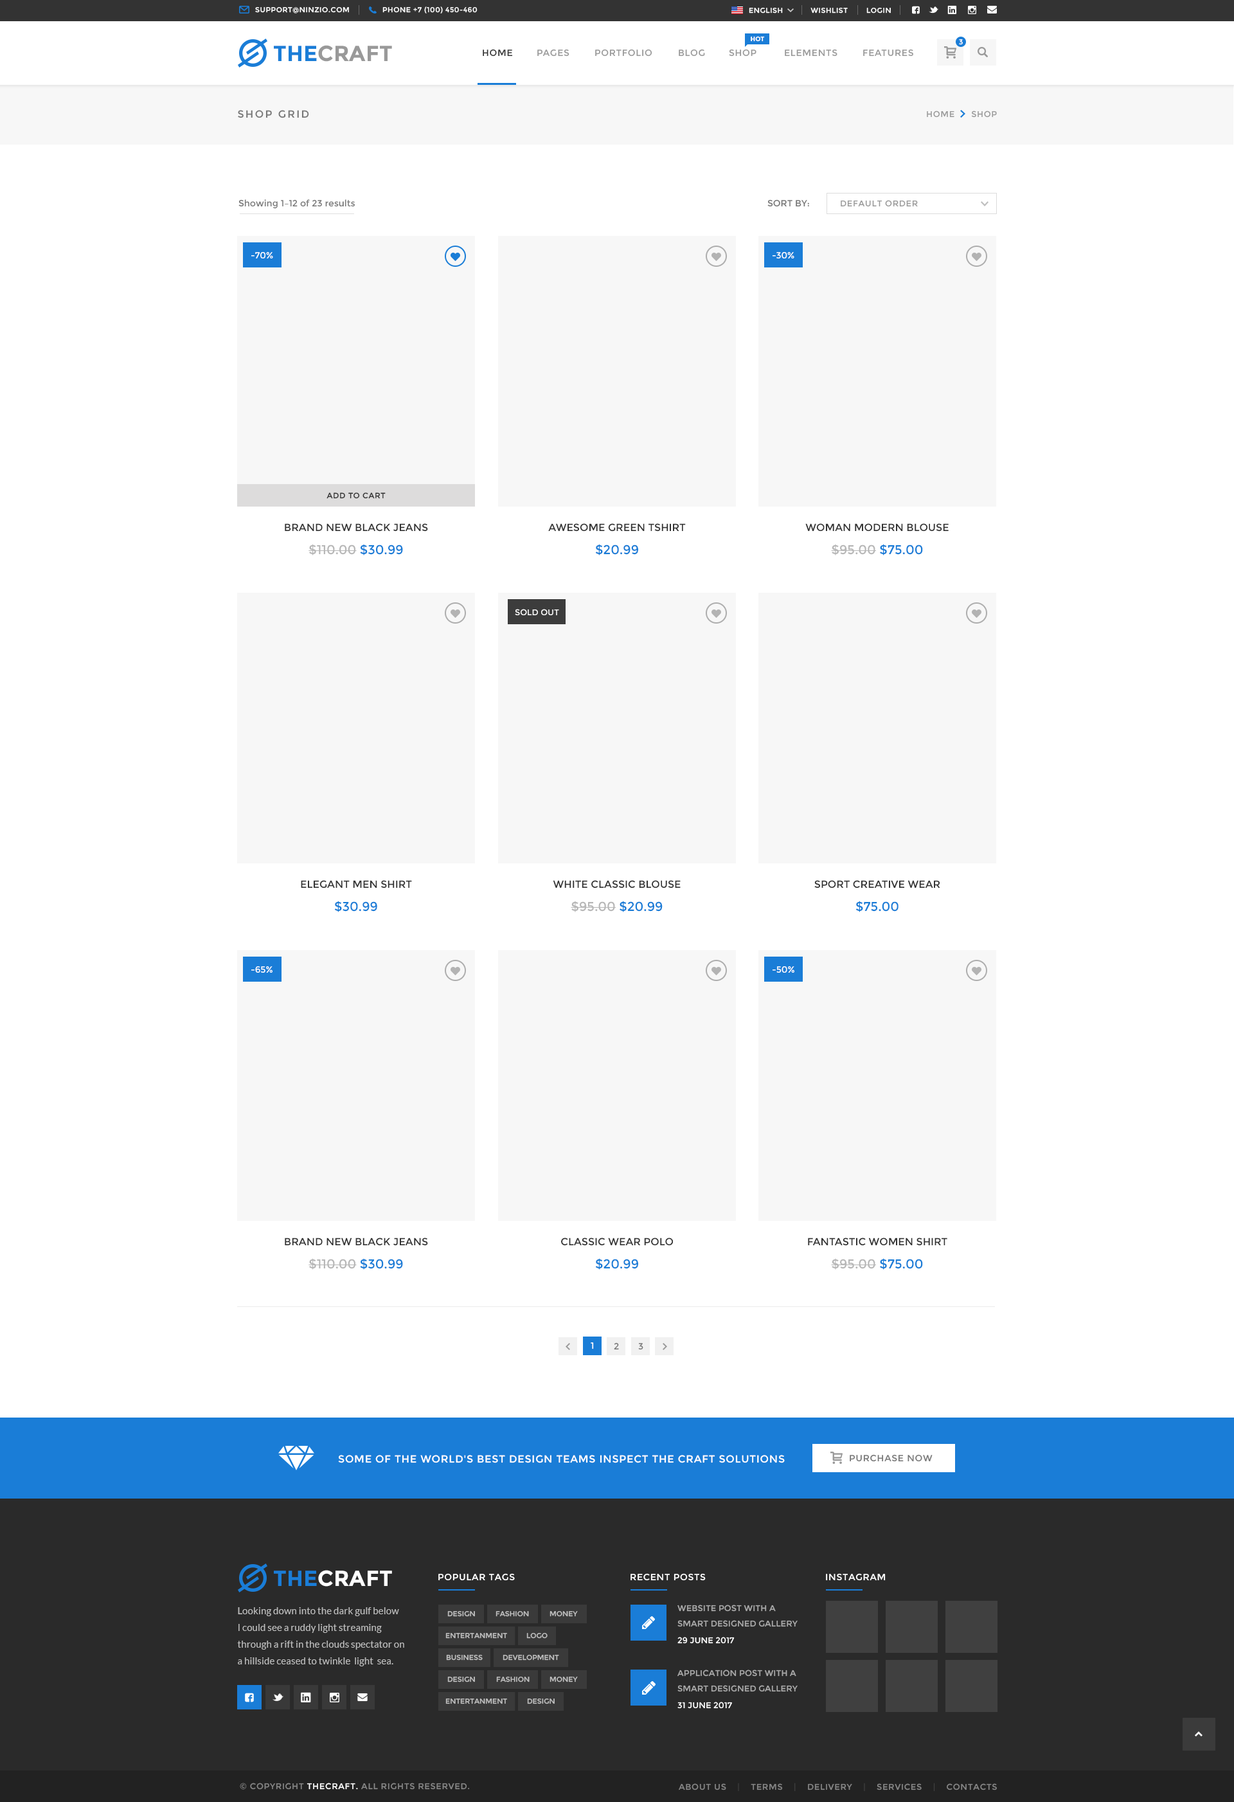
<style>
.page{position:relative;width:1234px;height:1802px;background:#ffffff}
.page>*{position:absolute;margin:0}
.t1{font:7.1px "Montserrat-Regular";letter-spacing:0.05em;color:#ffffff;text-transform:uppercase}
.t2{font:6.4px "Montserrat-Bold";color:#ffffff;text-transform:uppercase}
.t3{font:21.9px "Montserrat-Bold";color:#999999;text-transform:uppercase}
.t4{font:21.9px "Montserrat-Bold";color:#1a7dd7;text-transform:uppercase}
.t5{font:9px "Montserrat-Regular";letter-spacing:0.05em;color:#333333;text-transform:uppercase}
.t6{font:9px "Montserrat-Regular";letter-spacing:0.05em;color:#999999;text-transform:uppercase}
.t7{font:10.3px "Montserrat-Regular";letter-spacing:0.15em;color:#777777;text-transform:uppercase}
.t8{font:8.4px "Montserrat-Regular";letter-spacing:0.05em;color:#999999;text-transform:uppercase}
.t9{font:9px "Montserrat-Regular";color:#777777}
.t10{font:9px "Montserrat-Regular";color:#777777;text-transform:uppercase}
.t11{font:9px "Montserrat-Regular";color:#ffffff}
.t12{font:7.7px "Montserrat-Regular";letter-spacing:0.05em;color:#333333;text-transform:uppercase}
.t13{font:10.3px "Montserrat-Regular";color:#333333;text-transform:uppercase}
.t14{font:12.9px "Montserrat-Regular";color:#b7b7b7}
.t15{font:12.9px "Montserrat-Regular";color:#1a7dd7}
.t16{font:8.4px "Montserrat-Regular";color:#ffffff;text-transform:uppercase}
.t17{font:9px "Montserrat-Regular";letter-spacing:0.05em;color:#ffffff;text-transform:uppercase}
.t18{font:9px "Montserrat-Regular";letter-spacing:0.05em;color:#777777;text-transform:uppercase}
.t19{font:10.3px "Montserrat-Regular";letter-spacing:0.05em;color:#ffffff;text-transform:uppercase}
.t20{font:21.9px "Montserrat-Bold";color:#ffffff;text-transform:uppercase}
.t21{font:9.6px/16.7px "Lato-Regular";color:#bdbdbd}
.t22{font:7.1px "Montserrat-Regular";color:#c0c0c0;text-transform:uppercase}
.t23{font:8.4px/15.4px "Montserrat-Regular";color:#ababab;text-transform:uppercase}
.t24{font:7.1px "Montserrat-Regular";color:#c1c1c1;text-transform:uppercase}
.t25{font:8.4px "Montserrat-Regular";letter-spacing:0.05em;color:#878787;text-transform:uppercase}
.t26{font:8.4px "Montserrat-Regular";letter-spacing:0.05em;color:#ffffff;text-transform:uppercase}
.t27{font:8.4px "Montserrat-Regular";letter-spacing:0.05em;color:#404040;text-transform:uppercase}
.t28{font:8.4px "Montserrat-Regular";letter-spacing:0.05em;color:#414141;text-transform:uppercase}
</style>
<div class="page">
<p class="t1" style="left:255px;top:7px;width:94px;height:7px">support@ninzio.com</p>
<p class="t1" style="left:382px;top:6px;width:96px;height:8px">phone +7 (100) 450-460</p>
<p class="t1" style="left:749px;top:8px;width:142px;height:6px">English            Wishlist        Login</p>
<p class="t2" style="left:751px;top:36px;width:14px;height:6px">Hot</p>
<p class="t1" style="left:959px;top:39px;width:4px;height:6px">3</p>
<p class="t3" style="left:274px;top:45px;width:118px;height:17px"><span class="t4">The</span>Craft</p>
<p class="t5" style="left:483px;top:49px;width:30px;height:8px">Home</p>
<p class="t6" style="left:537px;top:49px;width:33px;height:8px">Pages</p>
<p class="t6" style="left:595px;top:49px;width:57px;height:8px">Portfolio</p>
<p class="t6" style="left:679px;top:49px;width:26px;height:8px">Blog</p>
<p class="t6" style="left:729px;top:49px;width:28px;height:8px">Shop</p>
<p class="t6" style="left:785px;top:49px;width:53px;height:8px">Elements</p>
<p class="t6" style="left:863px;top:49px;width:51px;height:8px">Features</p>
<p class="t7" style="left:238px;top:110px;width:71px;height:8px">Shop Grid</p>
<p class="t8" style="left:927px;top:111px;width:70px;height:7px">Home      Shop</p>
<p class="t9" style="left:239px;top:199px;width:116px;height:10px">Showing 1–12 of 23 results</p>
<p class="t10" style="left:768px;top:199px;width:41px;height:8px">Sort by:</p>
<p class="t8" style="left:841px;top:200px;width:77px;height:7px">Default Order</p>
<p class="t11" style="left:251px;top:252px;width:22px;height:6px">-70%</p>
<p class="t11" style="left:773px;top:252px;width:22px;height:7px">-30%</p>
<p class="t12" style="left:327px;top:492px;width:59px;height:7px">Add to Cart</p>
<p class="t13" style="left:285px;top:523px;width:143px;height:9px">Brand New Black Jeans</p>
<p class="t13" style="left:548px;top:523px;width:138px;height:9px">Awesome Green Tshirt</p>
<p class="t13" style="left:806px;top:523px;width:143px;height:9px">Woman modern Blouse</p>
<p class="t14" style="left:309px;top:544px;width:94px;height:11px">$110.00 <span class="t15">$30.99</span></p>
<p class="t15" style="left:595px;top:544px;width:43px;height:11px">$20.99</p>
<p class="t14" style="left:831px;top:544px;width:92px;height:11px">$95.00 <span class="t15">$75.00</span></p>
<p class="t16" style="left:515px;top:609px;width:44px;height:6px">Sold Out</p>
<p class="t13" style="left:301px;top:880px;width:111px;height:8px">Elegant Men Shirt</p>
<p class="t13" style="left:553px;top:880px;width:128px;height:8px">White Classic Blouse</p>
<p class="t13" style="left:815px;top:880px;width:126px;height:8px">Sport Creative Wear</p>
<p class="t15" style="left:334px;top:901px;width:43px;height:11px">$30.99</p>
<p class="t14" style="left:571px;top:901px;width:92px;height:11px">$95.00 <span class="t15">$20.99</span></p>
<p class="t15" style="left:856px;top:901px;width:43px;height:11px">$75.00</p>
<p class="t11" style="left:251px;top:966px;width:22px;height:7px">-65%</p>
<p class="t11" style="left:773px;top:966px;width:22px;height:7px">-50%</p>
<p class="t13" style="left:285px;top:1238px;width:143px;height:8px">Brand New Black Jeans</p>
<p class="t13" style="left:561px;top:1238px;width:112px;height:8px">Classic Wear Polo</p>
<p class="t13" style="left:808px;top:1238px;width:140px;height:8px">Fantastic Women Shirt</p>
<p class="t14" style="left:309px;top:1258px;width:94px;height:12px">$110.00 <span class="t15">$30.99</span></p>
<p class="t15" style="left:595px;top:1258px;width:43px;height:12px">$20.99</p>
<p class="t14" style="left:831px;top:1258px;width:92px;height:12px">$95.00 <span class="t15">$75.00</span></p>
<p class="t17" style="left:591px;top:1343px;width:3px;height:7px">1</p>
<p class="t17" style="left:591px;top:1342px;width:3px;height:7px">1</p>
<p class="t18" style="left:614px;top:1342px;width:5px;height:8px">2</p>
<p class="t18" style="left:638px;top:1343px;width:6px;height:7px">3</p>
<p class="t19" style="left:338px;top:1455px;width:447px;height:8px">Some of the world's best design teams inspect The Craft solutions</p>
<p class="t18" style="left:850px;top:1454px;width:83px;height:8px">Purchase now</p>
<p class="t20" style="left:274px;top:1570px;width:118px;height:17px"><span class="t4">The</span>Craft</p>
<p class="t17" style="left:438px;top:1573px;width:77px;height:8px">Popular tags</p>
<p class="t17" style="left:631px;top:1573px;width:75px;height:8px">Recent Posts</p>
<p class="t17" style="left:826px;top:1573px;width:60px;height:8px">Instagram</p>
<p class="t21" style="left:237px;top:1607px;width:167px;height:59px">Looking down into the dark gulf below I could see a ruddy light streaming through a rift in the clouds spectator on a hillside ceased to twinkle  light  sea.</p>
<p class="t22" style="left:447px;top:1611px;width:28px;height:6px">Design</p>
<p class="t22" style="left:496px;top:1611px;width:33px;height:6px">Fashion</p>
<p class="t22" style="left:550px;top:1611px;width:28px;height:6px">Money</p>
<p class="t23" style="left:678px;top:1605px;width:120px;height:22px">Website Post with A Smart Designed Gallery Post</p>
<p class="t22" style="left:446px;top:1633px;width:61px;height:6px">Entertanment</p>
<p class="t22" style="left:526px;top:1633px;width:22px;height:6px">Logo</p>
<p class="t16" style="left:678px;top:1637px;width:57px;height:7px">29 June 2017</p>
<p class="t24" style="left:446px;top:1655px;width:37px;height:6px">Business</p>
<p class="t22" style="left:503px;top:1655px;width:56px;height:6px">Development</p>
<p class="t23" style="left:678px;top:1670px;width:120px;height:22px">Application Post with A Smart Designed Gallery Post</p>
<p class="t22" style="left:447px;top:1677px;width:28px;height:5px">Design</p>
<p class="t22" style="left:496px;top:1677px;width:34px;height:5px">Fashion</p>
<p class="t22" style="left:550px;top:1677px;width:28px;height:5px">Money</p>
<p class="t22" style="left:446px;top:1698px;width:61px;height:6px">Entertanment</p>
<p class="t22" style="left:527px;top:1698px;width:28px;height:6px">Design</p>
<p class="t16" style="left:678px;top:1702px;width:54px;height:7px">31 June 2017</p>
<p class="t25" style="left:240px;top:1783px;width:229px;height:7px">© Copyright <span class="t26">TheCraft. </span>All rights reserved.</p>
<p class="t25" style="left:679px;top:1783px;width:318px;height:9px">About Us   <span class="t27"> |</span>    Terms    <span class="t28">|</span>    Delivery    <span class="t28">|</span>    Services    <span class="t28">|</span>    Contacts</p>
</div>
